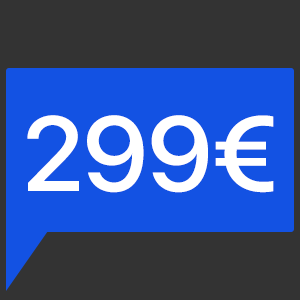
<style>
.page{position:relative;width:300px;height:300px;background:#333333}
.page>*{position:absolute;margin:0}
.t1{font:105px "SFUIDisplay-Medium";color:#ffffff}
</style>
<div class="page">
<p class="t1" style="left:27px;top:115px;width:247px;height:78px">299€</p>
</div>
